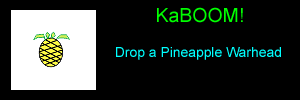
<style>
.page{position:relative;width:300px;height:100px;background:#000000}
.page>*{position:absolute;margin:0}
.t1{font:19.4px "ArialMT";color:#00ff00}
.t2{font:13.9px "ArialMT";color:#00ffff}
</style>
<div class="page">
<p class="t1" style="left:157px;top:7px;width:86px;height:16px">KaBOOM!</p>
<p class="t2" style="left:116px;top:47px;width:165px;height:13px">Drop a Pineapple Warhead</p>
</div>
